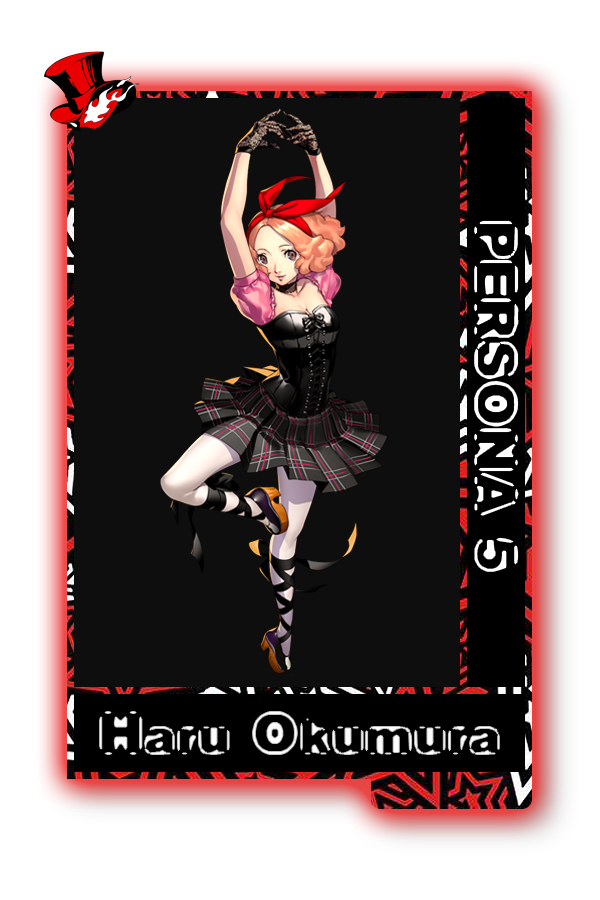
<style>
.page{position:relative;width:600px;height:900px;background:#0e0e0e}
.page>*{position:absolute;margin:0}
.t1{font:41.7px "Untitled";color:#ffffff}
.t2{font:41.7px "Untitled";color:#fdfdfd}
</style>
<div class="page">
<p class="t1" style="left:475px;top:221px;width:43px;height:350px;rotate:90deg">PERSONA 5</p>
<p class="t2" style="left:100px;top:712px;width:399px;height:42px">Haru Okumura</p>
</div>
